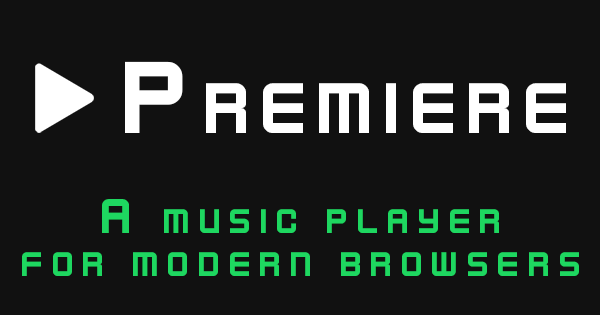
<style>
.page{position:relative;width:600px;height:315px;background:#111111}
.page>*{position:absolute;margin:0}
.t1{font:113.6px "KenVector-Future-Thin";color:#ffffff;font-variant:small-caps}
.t2{font:54.2px/43.5px "KenVector-Future-Thin";letter-spacing:0.1em;color:#1ed760;font-variant:small-caps}
</style>
<div class="page">
<p class="t1" style="left:125px;top:61px;width:441px;height:72px">Premiere</p>
<p class="t2" style="left:22px;top:199px;width:557px;height:77px;text-align:center">A music player<br>for modern browsers</p>
</div>
